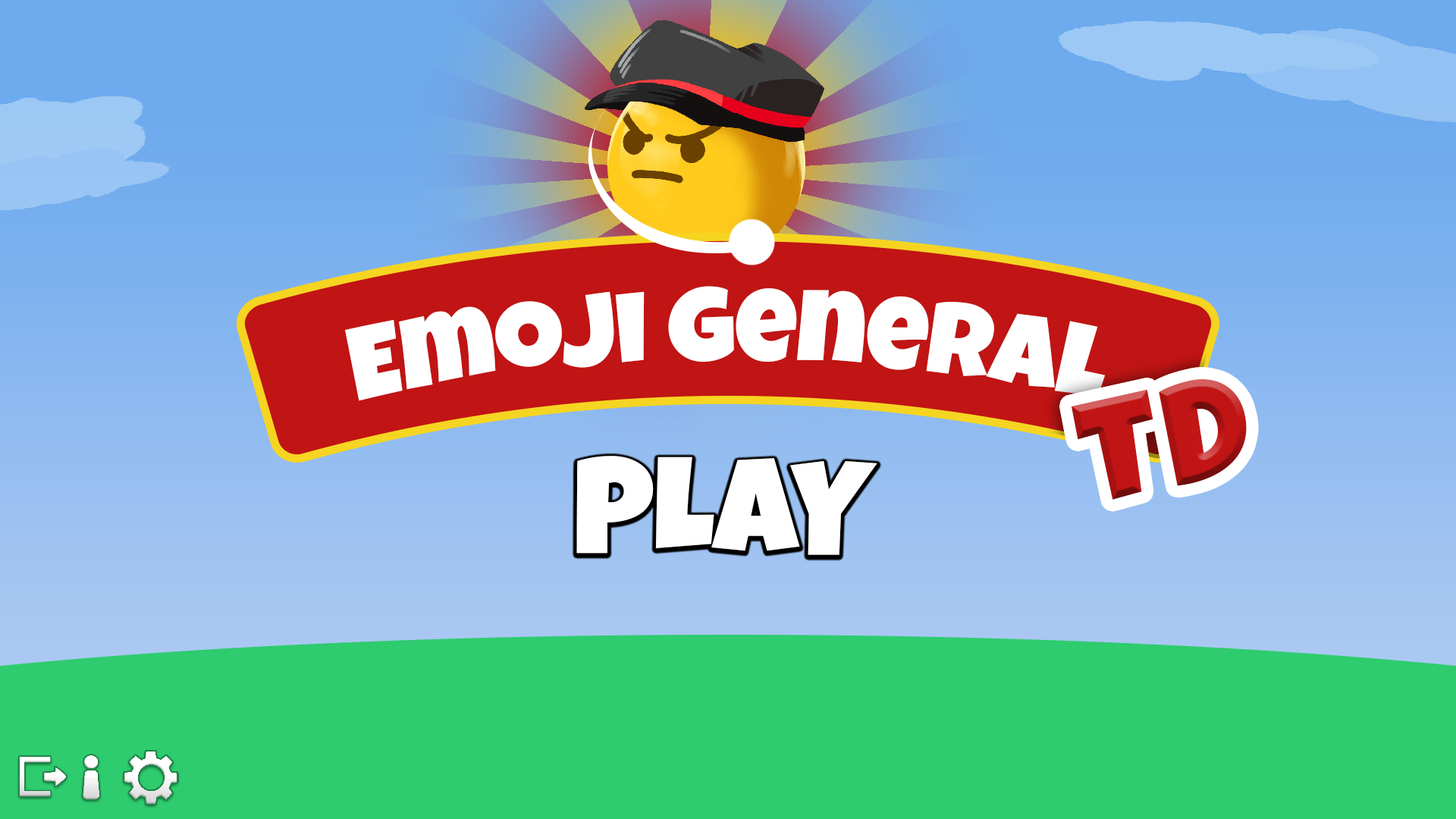
<style>
.page{position:relative;width:1456px;height:819px;background:#2ecc6e}
.page>*{position:absolute;margin:0}
.t1{font:102.1px "LuckiestGuy-Regular";color:#ffffff}
.t2{font:145.5px "LuckiestGuy-Regular";letter-spacing:0.04em;color:#c11414}
.t3{font:134.1px "LuckiestGuy-Regular";color:#ffffff}
</style>
<div class="page">
<p class="t1" style="left:345px;top:286px;width:761px;height:115px">Emoji General</p>
<p class="t2" style="left:1071px;top:379px;width:176px;height:121px;rotate:-12deg">TD</p>
<p class="t3" style="left:576px;top:456px;width:301px;height:99px">PLAY</p>
</div>
